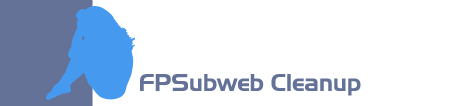
<style>
.page{position:relative;width:453px;height:106px;background:#ffffff}
.page>*{position:absolute;margin:0}
.t1{font:24px "Slicker";color:#647298}
</style>
<div class="page">
<p class="t1" style="left:140px;top:74px;width:221px;height:22px">FPSubweb Cleanup</p>
</div>
